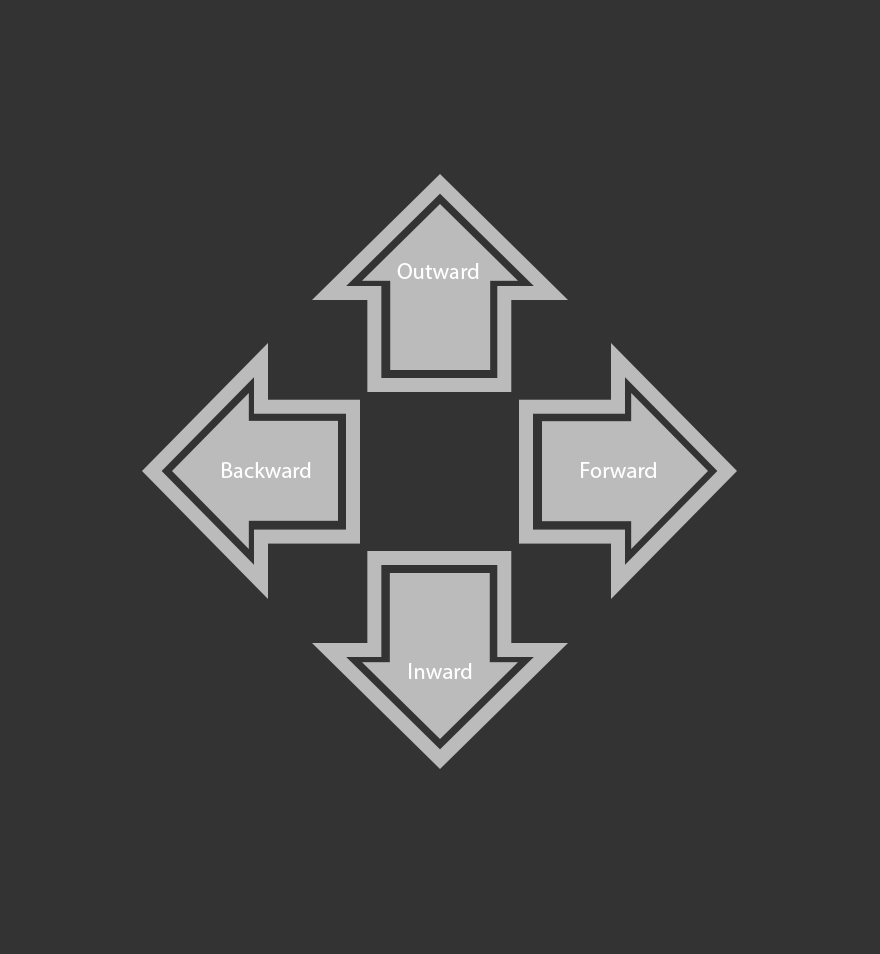
<style>
.page{position:relative;width:880px;height:954px;background:#333333}
.page>*{position:absolute;margin:0}
.t1{font:22.5px "MyriadPro-Regular";color:#ffffff}
</style>
<div class="page">
<p class="t1" style="left:397px;top:263px;width:82px;height:16px">Outward</p>
<p class="t1" style="left:222px;top:462px;width:89px;height:16px">Backward</p>
<p class="t1" style="left:581px;top:462px;width:75px;height:16px">Forward</p>
<p class="t1" style="left:409px;top:663px;width:63px;height:16px">Inward</p>
</div>
